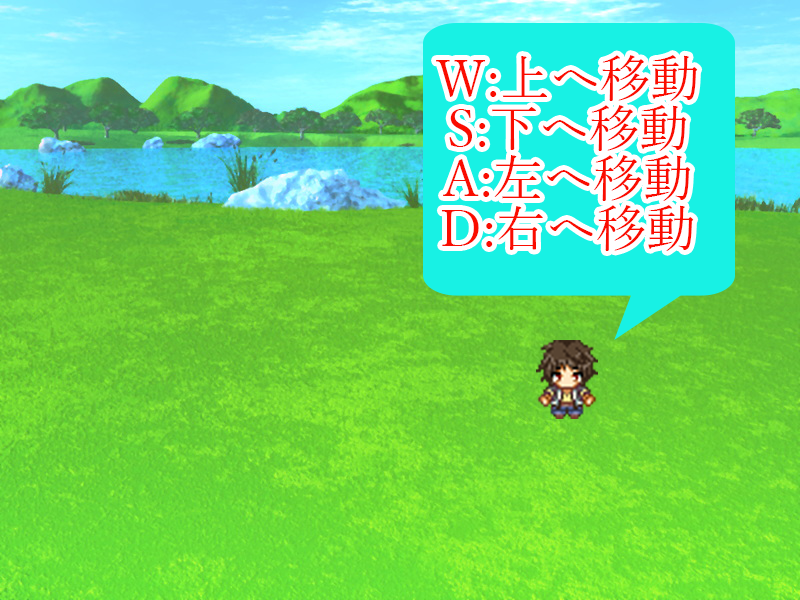
<style>
.page{position:relative;width:800px;height:600px}
.page>*{position:absolute;margin:0}
.t1{font:50px/50px "YuMincho-Regular";color:#fa0c00}
</style>
<div class="page">
<p class="t1" style="left:436px;top:55px;width:262px;height:196px;text-align:center">W:上へ移動<br>S:下へ移動<br>A:左へ移動<br>D:右へ移動</p>
</div>
